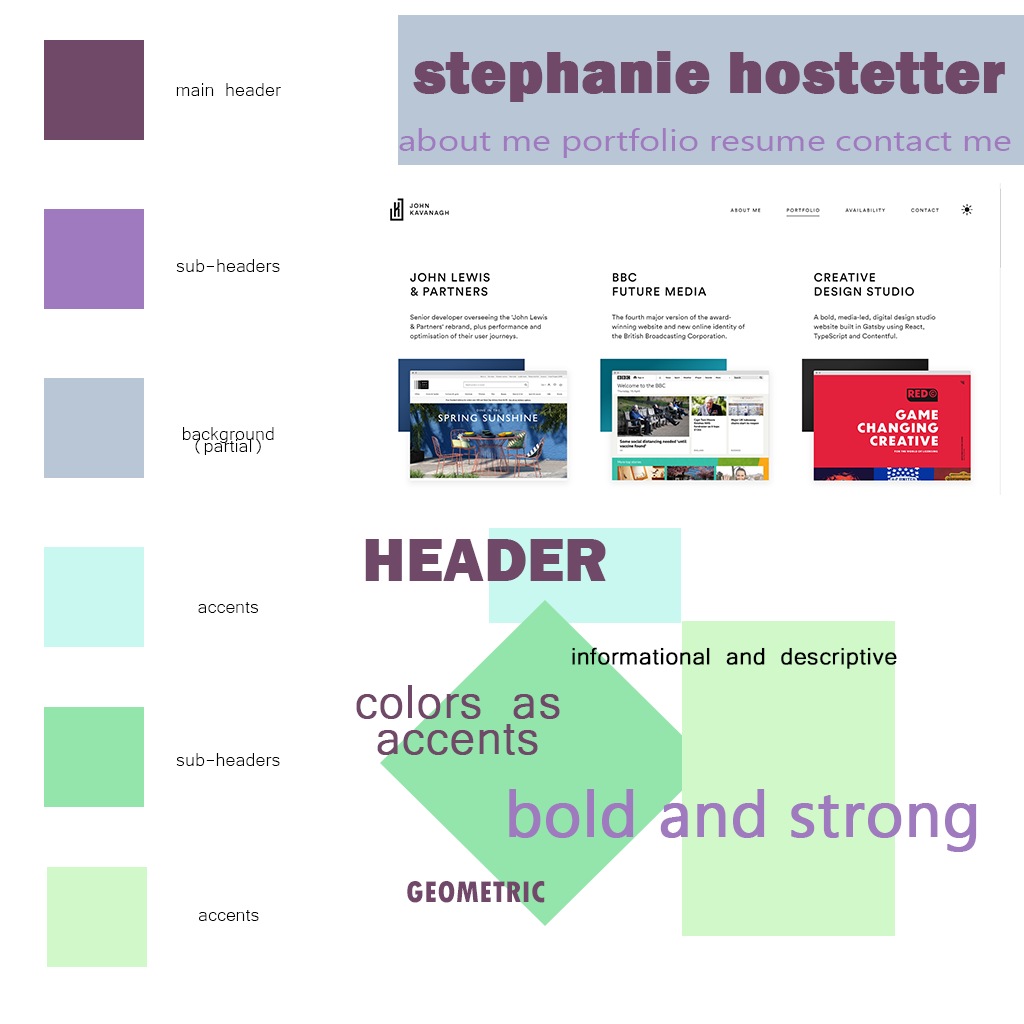
<style>
.page{position:relative;width:1024px;height:1024px;background:#ffffff}
.page>*{position:absolute;margin:0}
.t1{font:60px "FranklinGothic-Heavy";color:#704868;font-weight:bold}
.t2{font:24px "Microsoft-Yi-Baiti";color:#000000}
.t3{font:30px "SegoeUI";color:#a07abf;scale:1.2 1}
.t4{font:24px/12px "Microsoft-Yi-Baiti";color:#000000}
.t5{font:63.1px "FranklinGothic-Heavy";color:#704868}
.t6{font:30px "Microsoft-Yi-Baiti";color:#000000;font-weight:bold}
.t7{font:60px "Microsoft-Yi-Baiti";color:#704868;font-weight:bold}
.t8{font:63.1px "MicrosoftNewTaiLue";color:#a07abf;font-weight:bold}
.t9{font:31.5px "TwCenMT-CondensedExtraBold";color:#714869}
</style>
<div class="page">
<p class="t1" style="left:413px;top:51px;width:592px;height:51px">stephanie hostetter</p>
<p class="t2" style="left:176px;top:83px;width:105px;height:13px">main header</p>
<p class="t3" style="left:399px;top:128px;width:612px;height:30px">about me portfolio resume contact me</p>
<p class="t2" style="left:176px;top:259px;width:104px;height:13px">sub-headers</p>
<p class="t4" style="left:183px;top:427px;width:91px;height:28px;text-align:center">background<br>(partial)</p>
<p class="t5" style="left:365px;top:539px;width:241px;height:42px">HEADER</p>
<p class="t2" style="left:198px;top:602px;width:60px;height:11px">accents</p>
<p class="t6" style="left:572px;top:647px;width:325px;height:22px">informational and descriptive</p>
<p class="t7" style="left:356px;top:685px;width:204px;height:70px">colors as accents</p>
<p class="t2" style="left:176px;top:753px;width:104px;height:13px">sub-headers</p>
<p class="t8" style="left:509px;top:789px;width:468px;height:63px">bold and strong</p>
<p class="t9" style="left:407px;top:881px;width:138px;height:22px">GEOMETRIC</p>
<p class="t2" style="left:199px;top:910px;width:60px;height:11px">accents</p>
</div>
